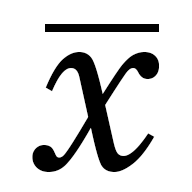
<style>
.page{position:relative;width:192px;height:192px;background:#ffffff}
.page>*{position:absolute;margin:0}
.t1{font:250px "CenturySchoolbook-Italic";color:#000000}
</style>
<div class="page">
<p class="t1" style="left:32px;top:52px;width:127px;height:120px">x</p>
</div>
